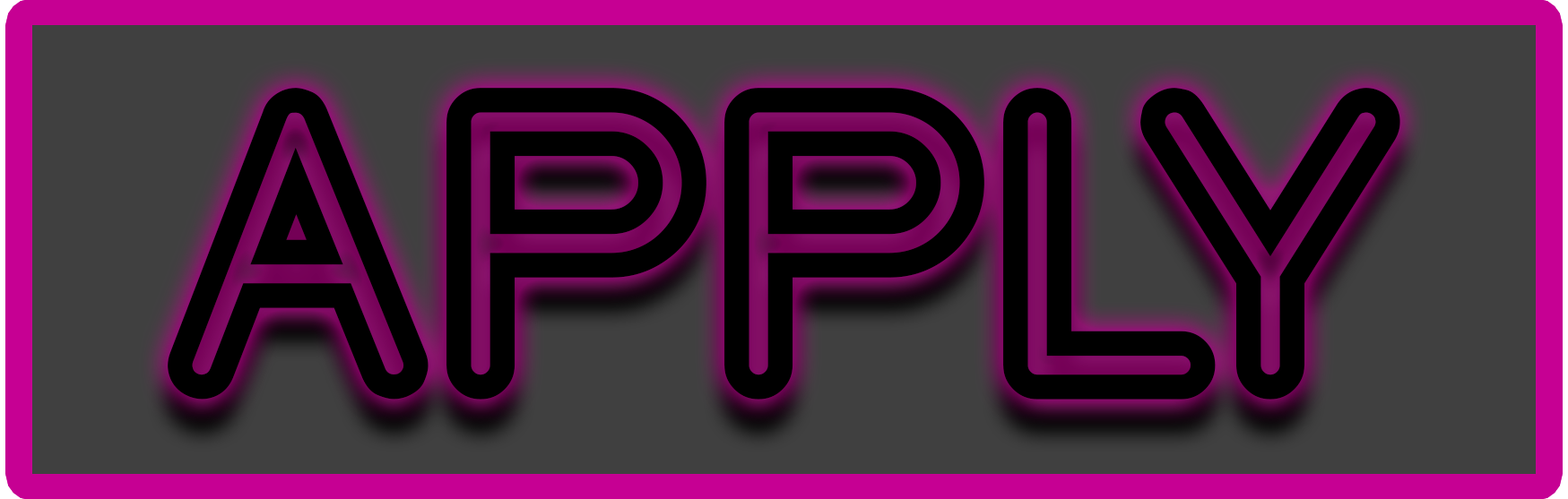
<style>
.page{position:relative;width:1568px;height:499px;background:#404040}
.page>*{position:absolute;margin:0}
.t1{font:412.8px "NEONGLOW-Bold";color:#000000}
</style>
<div class="page">
<p class="t1" style="left:168px;top:88px;width:1232px;height:312px">APPLY</p>
</div>
